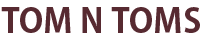
<style>
.page{position:relative;width:200px;height:40px;background:#ffffff}
.page>*{position:absolute;margin:0}
.t1{font:33.4px "AdobeGothicStd-Bold";color:#572a31}
</style>
<div class="page">
<p class="t1" style="left:1px;top:7px;width:199px;height:26px">TOM N TOMS</p>
</div>
